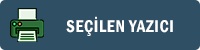
<style>
.page{position:relative;width:200px;height:50px;background:#2f4f64}
.page>*{position:absolute;margin:0}
.t1{font:17.8px "FranklinGothic-DemiCond";letter-spacing:0.04em;color:#ffffff;scale:0.93 1}
</style>
<div class="page">
<p class="t1" style="left:66px;top:16px;width:107px;height:20px">SEÇİLEN YAZICI</p>
</div>
